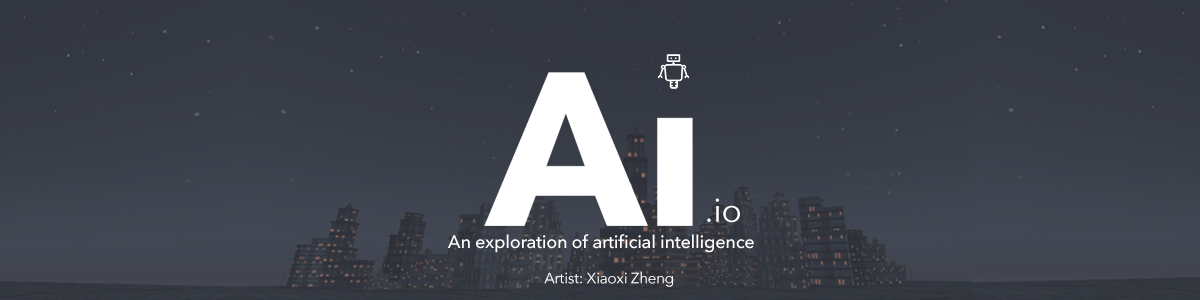
<style>
.page{position:relative;width:1200px;height:300px}
.page>*{position:absolute;margin:0}
.t1{font:33.5px "AvenirNext-Regular";letter-spacing:-0.01em;color:#ffffff}
.t2{font:18px "AvenirNext-Medium";letter-spacing:-0.01em;color:#ffffff}
.t3{font:15px "AvenirNext-Regular";letter-spacing:-0.01em;color:#ffffff}
</style>
<div class="page">
<p class="t1" style="left:707px;top:198px;width:33px;height:25px">.io</p>
<p class="t2" style="left:447px;top:234px;width:307px;height:19px">An exploration of artificial intelligence</p>
<p class="t3" style="left:544px;top:271px;width:129px;height:16px">Artist: Xiaoxi Zheng</p>
</div>
